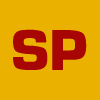
<style>
.page{position:relative;width:100px;height:100px;background:#ebb100}
.page>*{position:absolute;margin:0}
.t1{font:60px "Eurostile-Black";color:#a80505}
</style>
<div class="page">
<p class="t1" style="left:13px;top:29px;width:74px;height:41px">SP</p>
</div>
